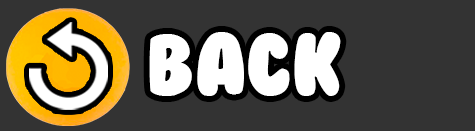
<style>
.page{position:relative;width:475px;height:131px;background:#333333}
.page>*{position:absolute;margin:0}
.t1{font:80px "BubbleGum";color:#ffffff}
</style>
<div class="page">
<p class="t1" style="left:149px;top:32px;width:192px;height:64px">Back</p>
</div>
